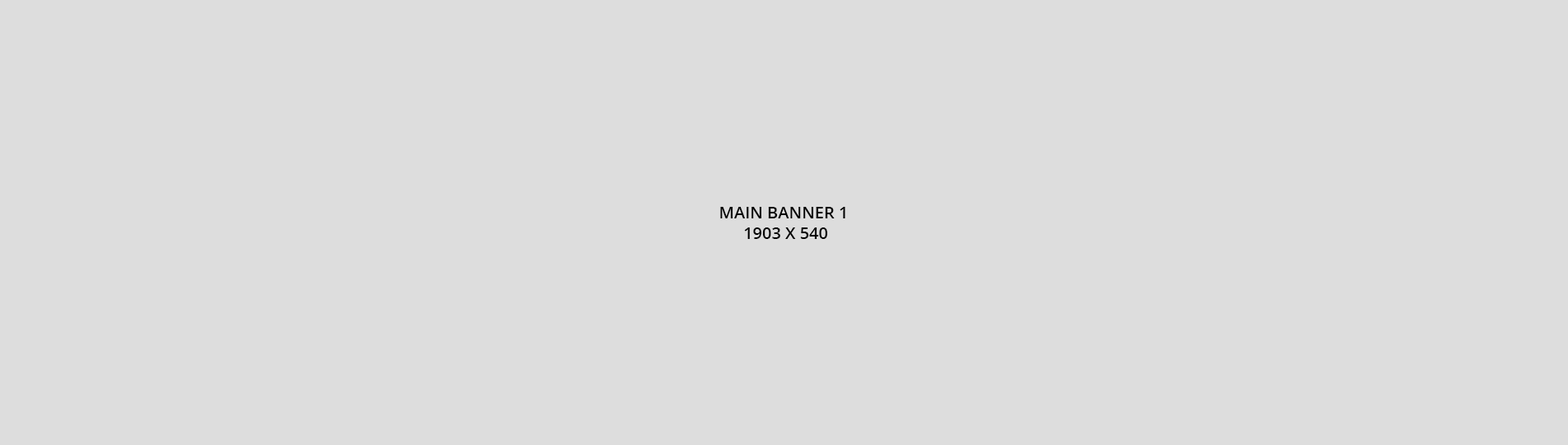
<style>
.page{position:relative;width:1568px;height:445px;background:#dddddd}
.page>*{position:absolute;margin:0}
.t1{font:16.5px/20.6px "OpenSans-Semibold";color:#000000;text-transform:uppercase}
</style>
<div class="page">
<p class="t1" style="left:720px;top:207px;width:125px;height:32px;text-align:center">main banner 1 <br>1903 x 540</p>
</div>
